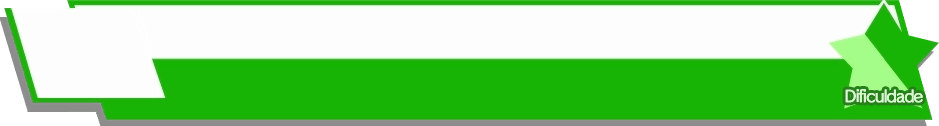
<style>
.page{position:relative;width:939px;height:126px;background:#fefdfe}
.page>*{position:absolute;margin:0}
.t1{font:16px "RodinPro-M";letter-spacing:-0.06em;color:#d7f7cf;font-weight:bold}
</style>
<div class="page">
<p class="t1" style="left:845px;top:89px;width:78px;height:14px">Dificuldade</p>
</div>
